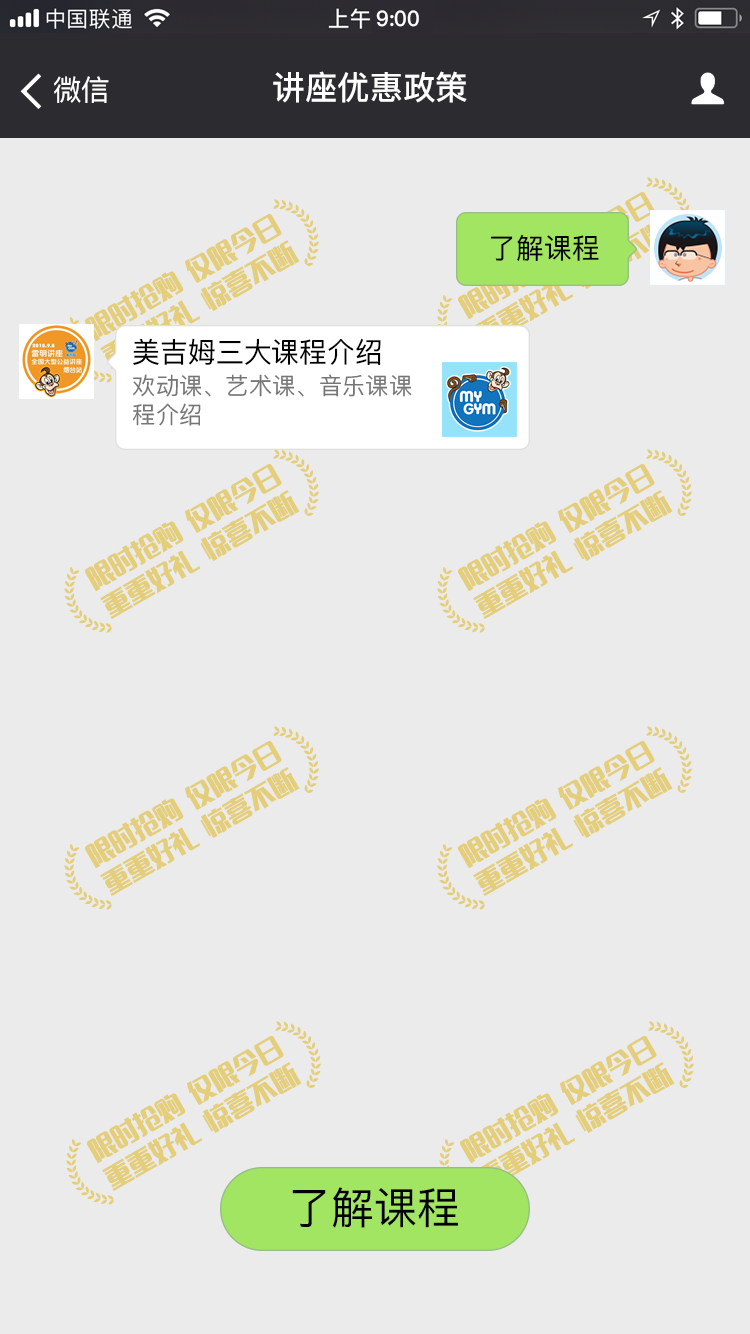
<style>
.page{position:relative;width:750px;height:1334px;background:#ebebeb}
.page>*{position:absolute;margin:0}
.t1{font:21.3px "PingFangSC-Medium";color:#ffffff}
.t2{font:28.8px "PingFangSC-Regular";color:#ffffff}
.t3{font:32.9px "PingFangSC-Medium";color:#ffffff}
.t4{font:28.1px "PingFangSC-Regular";color:#000000}
.t5{font:23.6px/34.1px "PingFangSC-Regular";color:#757575}
.t6{font:43.4px "PingFangSC-Regular";color:#000000}
</style>
<div class="page">
<p class="t1" style="left:376px;top:10px;width:43px;height:17px">9:00</p>
<p class="t2" style="left:54px;top:76px;width:55px;height:27px">微信</p>
<p class="t3" style="left:273px;top:71px;width:194px;height:32px">讲座优惠政策</p>
<p class="t4" style="left:491px;top:234px;width:108px;height:27px">了解课程</p>
<p class="t4" style="left:133px;top:338px;width:248px;height:27px">美吉姆三大课程介绍</p>
<p class="t5" style="left:132px;top:374px;width:280px;height:52px">欢动课、艺术课、音乐课课<br>程介绍</p>
<p class="t6" style="left:292px;top:1187px;width:166px;height:41px">了解课程</p>
</div>
